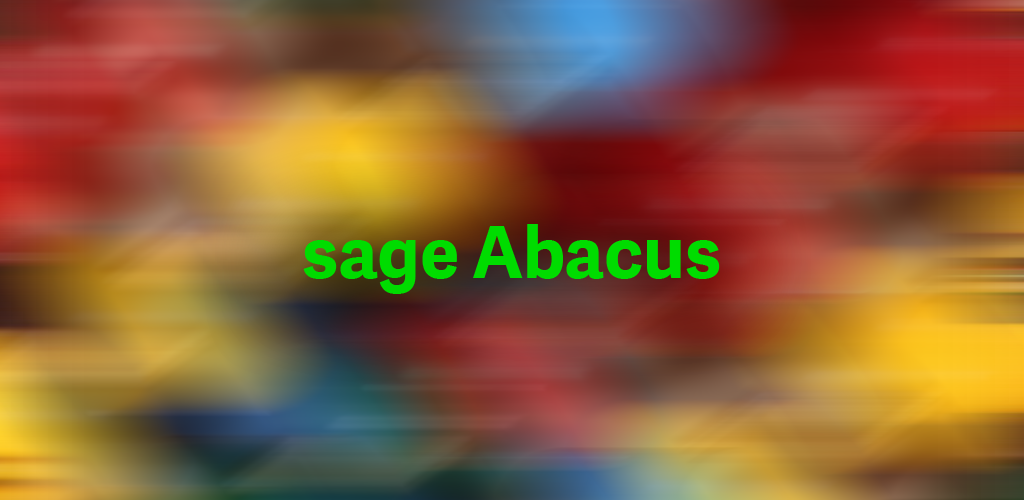
<style>
.page{position:relative;width:1024px;height:500px}
.page>*{position:absolute;margin:0}
.t1{font:72px "AdelleSansSAGE-Bold";color:#00dc00}
</style>
<div class="page">
<p class="t1" style="left:303px;top:224px;width:417px;height:70px">sage Abacus</p>
</div>
